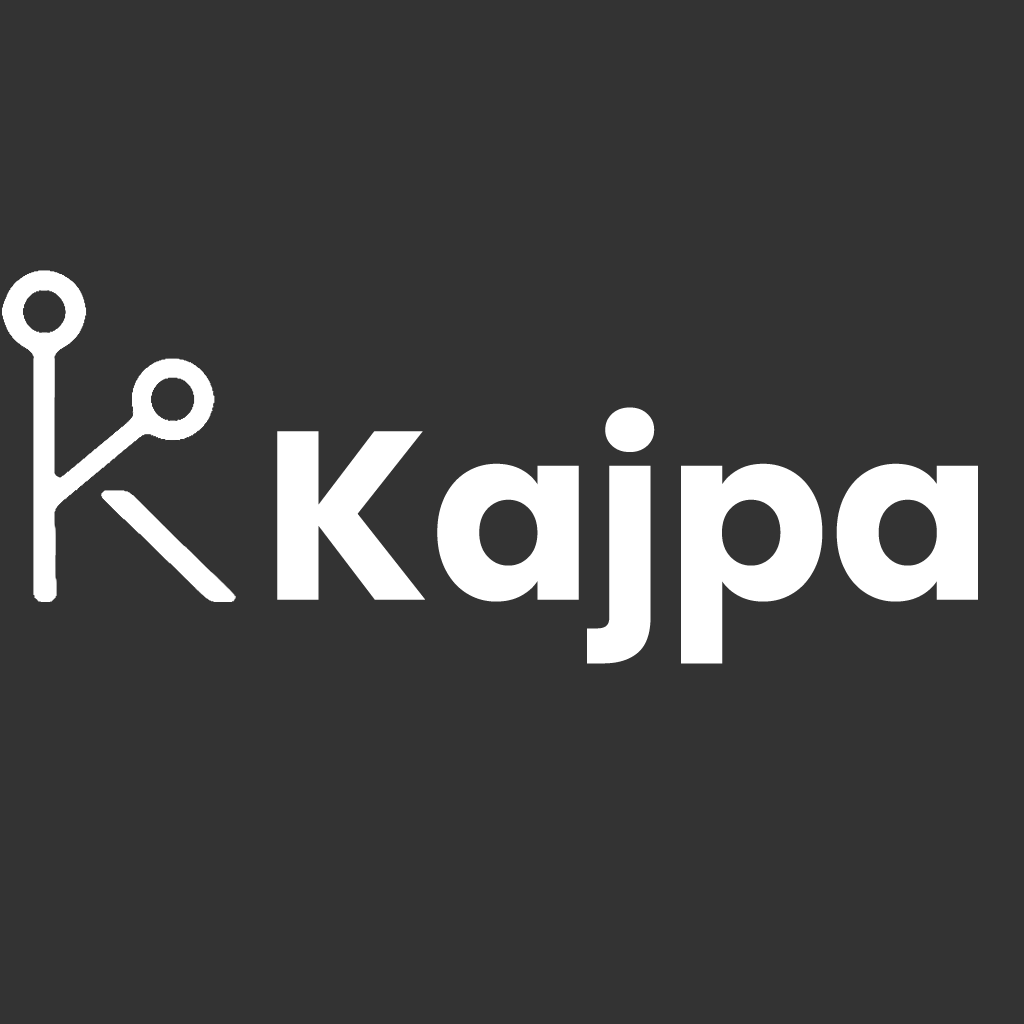
<style>
.page{position:relative;width:1024px;height:1024px;background:#333333}
.page>*{position:absolute;margin:0}
.t1{font:239.6px "Poppins-Bold";letter-spacing:0.005em;color:#ffffff}
</style>
<div class="page">
<p class="t1" style="left:277px;top:407px;width:701px;height:257px">Kajpa</p>
</div>
